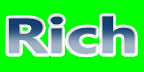
<style>
.page{position:relative;width:144px;height:72px;background:#00ff00}
.page>*{position:absolute;margin:0}
.t1{font:49.7px "Ebrima-Bold";scale:1.34 1}
</style>
<div class="page">
<p class="t1" style="left:8px;top:16px;width:127px;height:38px">Rich</p>
</div>
